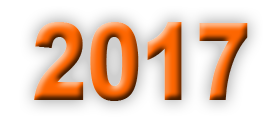
<style>
.page{position:relative;width:280px;height:130px;background:#ffffff}
.page>*{position:absolute;margin:0}
.t1{font:108.2px "Arial-Black";scale:0.76 1}
</style>
<div class="page">
<p class="t1" style="left:34px;top:22px;width:214px;height:79px">2017</p>
</div>
